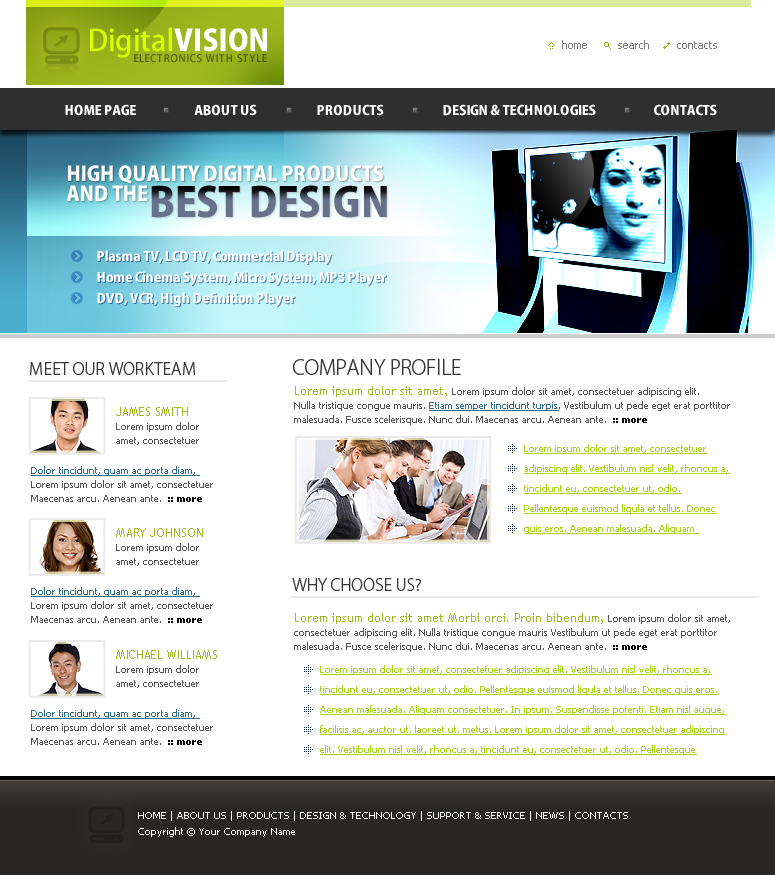
<style>
.page{position:relative;width:775px;height:875px;background:#ffffff}
.page>*{position:absolute;margin:0}
.t1{font:29px "KozGoPro-Medium";color:#d6ff00}
.t2{font:29px "KozGoPro-Heavy";color:#ffffff}
.t3{font:11px "Tahoma";color:#7b7b7b}
.t4{font:10px "KozGoPro-Medium";letter-spacing:0.08em;color:#4e5b0f}
.t5{font:13px "KozGoPro-Heavy";color:#ffffff}
.t6{font:20px "KozGoPro-Heavy";color:#ffffff}
.t7{font:40px "KozGoPro-Heavy"}
.t8{font:16px "KozGoPro-Light";color:#363636}
.t9{font:20px "KozGoPro-Light";color:#363636}
.t10{font:10px/14px "Tahoma";color:#535353}
.t11{font:12px/14px "TrebuchetMS";color:#a0b920}
.t12{font:10px/14px "Tahoma";color:#306b89;text-decoration:underline}
.t13{font:10px/14px "Tahoma-Bold";color:#000000}
.t14{font:10px/20px "Tahoma";color:#a8d217;text-decoration:underline}
.t15{font:10px/16px "Tahoma";color:#ffffff}
</style>
<div class="page">
<p class="t1" style="left:90px;top:27px;width:177px;height:31px">Digital<span class="t2">VISION</span></p>
<p class="t3" style="left:562px;top:40px;width:25px;height:9px">home</p>
<p class="t3" style="left:618px;top:40px;width:31px;height:9px">search</p>
<p class="t3" style="left:677px;top:41px;width:40px;height:8px">contacts</p>
<p class="t4" style="left:134px;top:54px;width:133px;height:9px">ELECTRONICS WITH STYLE</p>
<p class="t5" style="left:65px;top:104px;width:71px;height:12px">HOME PAGE</p>
<p class="t5" style="left:194px;top:104px;width:63px;height:12px">ABOUT US</p>
<p class="t5" style="left:317px;top:104px;width:67px;height:12px">PRODUCTS</p>
<p class="t5" style="left:443px;top:104px;width:153px;height:12px">DESIGN &amp; TECHNOLOGIES</p>
<p class="t5" style="left:654px;top:104px;width:63px;height:12px">CONTACTS</p>
<p class="t6" style="left:68px;top:165px;width:315px;height:19px">HIGH QUALITY DIGITAL PRODUCTS</p>
<p class="t6" style="left:66px;top:185px;width:82px;height:17px">AND THE</p>
<p class="t7" style="left:151px;top:185px;width:236px;height:33px">BEST DESIGN</p>
<p class="t5" style="left:97px;top:250px;width:235px;height:15px">Plasma TV, LCD TV, Commercial Display</p>
<p class="t5" style="left:97px;top:271px;width:289px;height:15px">Home Cinema System, Micro System, MP3 Player</p>
<p class="t5" style="left:97px;top:292px;width:198px;height:15px">DVD, VCR, High Definition Player</p>
<p class="t8" style="left:30px;top:362px;width:165px;height:13px">MEET OUR WORKTEAM</p>
<p class="t9" style="left:293px;top:359px;width:168px;height:16px">COMPANY PROFILE</p>
<p class="t10" style="left:294px;top:386px;width:436px;height:39px"><span class="t11">Lorem ipsum dolor sit amet, </span>Lorem ipsum dolor sit amet, consectetuer adipiscing elit. <br>Nulla tristique congue mauris. <span class="t12">Etiam semper tincidunt turpis</span>. Vestibulum ut pede eget erat porttitor malesuada. Fusce scelerisque. Nunc dui. Maecenas arcu. Aenean ante.  <span class="t13">:: more</span></p>
<p class="t10" style="left:116px;top:407px;width:83px;height:38px"><span class="t11">JAMES SMITH<br></span>Lorem ipsum dolor amet, consectetuer</p>
<p class="t14" style="left:524px;top:444px;width:206px;height:90px">Lorem ipsum dolor sit amet, consectetuer adipiscing elit. Vestibulum nisl velit, rhoncus a, tincidunt eu, consectetuer ut, odio. Pellentesque euismod ligula et tellus. Donec quis eros. Aenean malesuada. Aliquam</p>
<p class="t10" style="left:31px;top:466px;width:182px;height:36px"><span class="t12">Dolor tincidunt, quam ac porta diam, <br></span>Lorem ipsum dolor sit amet, consectetuer Maecenas arcu. Aenean ante.  <span class="t13">:: more</span></p>
<p class="t10" style="left:116px;top:528px;width:87px;height:38px"><span class="t11">MARY JOHNSON<br></span>Lorem ipsum dolor amet, consectetuer</p>
<p class="t8" style="left:292px;top:578px;width:129px;height:13px">WHY CHOOSE US?</p>
<p class="t10" style="left:31px;top:587px;width:182px;height:36px"><span class="t12">Dolor tincidunt, quam ac porta diam, <br></span>Lorem ipsum dolor sit amet, consectetuer Maecenas arcu. Aenean ante.  <span class="t13">:: more</span></p>
<p class="t10" style="left:294px;top:613px;width:436px;height:39px"><span class="t11">Lorem ipsum dolor sit amet Morbi orci. Proin bibendum, </span>Lorem ipsum dolor sit amet, consectetuer adipiscing elit. Nulla tristique congue mauris Vestibulum ut pede eget erat porttitor malesuada. Fusce scelerisque. Nunc dui. Maecenas arcu. Aenean ante.  <span class="t13">:: more</span></p>
<p class="t10" style="left:116px;top:650px;width:101px;height:38px"><span class="t11">MICHAEL WILLIAMS<br></span>Lorem ipsum dolor amet, consectetuer</p>
<p class="t14" style="left:320px;top:665px;width:406px;height:90px">Lorem ipsum dolor sit amet, consectetuer adipiscing elit. Vestibulum nisl velit, rhoncus a, tincidunt eu, consectetuer ut, odio. Pellentesque euismod ligula et tellus. Donec quis eros. Aenean malesuada. Aliquam consectetuer. In ipsum. Suspendisse potenti. Etiam nisl augue, facilisis ac, auctor ut, laoreet ut, metus. Lorem ipsum dolor sit amet, consectetuer adipiscing elit. Vestibulum nisl velit, rhoncus a, tincidunt eu, consectetuer ut, odio. Pellentesque</p>
<p class="t10" style="left:31px;top:709px;width:182px;height:36px"><span class="t12">Dolor tincidunt, quam ac porta diam, <br></span>Lorem ipsum dolor sit amet, consectetuer Maecenas arcu. Aenean ante.  <span class="t13">:: more</span></p>
<p class="t15" style="left:138px;top:811px;width:490px;height:26px">HOME | ABOUT US | PRODUCTS | DESIGN &amp; TECHNOLOGY | SUPPORT &amp; SERVICE | NEWS | CONTACTS<br>Copyright © Your Company Name</p>
</div>
